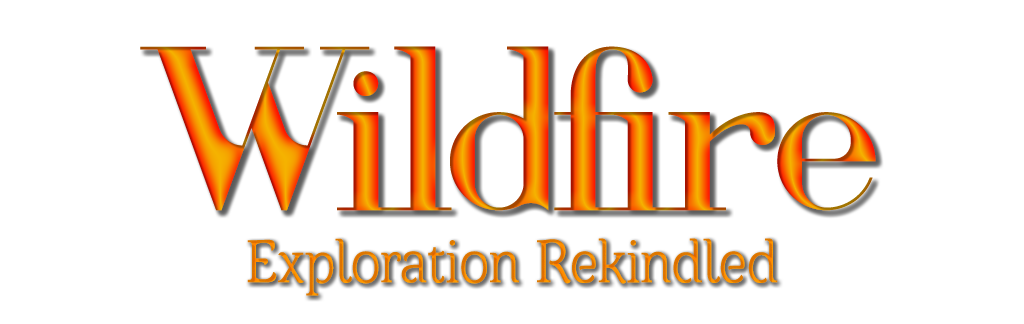
<style>
.page{position:relative;width:1024px;height:324px;background:#ffffff}
.page>*{position:absolute;margin:0}
.t1{font:240px "Voor"}
.t2{font:61.9px "Barkentina";color:#e07900;scale:0.84 1}
</style>
<div class="page">
<p class="t1" style="left:140px;top:46px;width:736px;height:165px">Wildfire</p>
<p class="t2" style="left:247px;top:238px;width:531px;height:58px">Exploration Rekindled</p>
</div>
